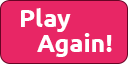
<style>
.page{position:relative;width:128px;height:64px;background:#e82665}
.page>*{position:absolute;margin:0}
.t1{font:25px/25px "Ubuntu-Bold";color:#ffffff}
</style>
<div class="page">
<p class="t1" style="left:21px;top:8px;width:91px;height:49px">Play<br>   Again!</p>
</div>
